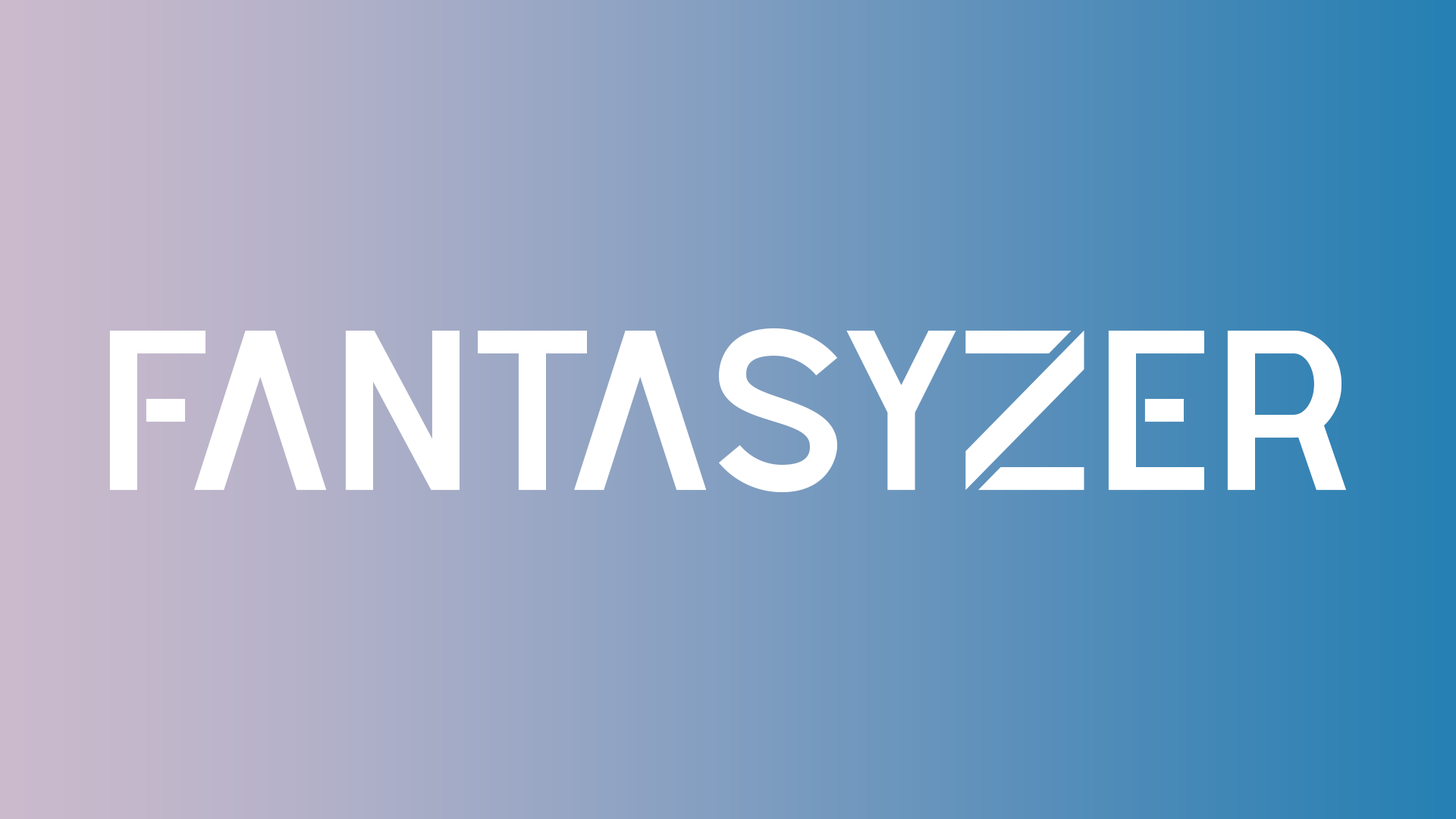
<style>
.page{position:relative;width:1456px;height:819px}
.page>*{position:absolute;margin:0}
.t1{font:227.5px "DesertaRegular";color:#ffffff}
</style>
<div class="page">
<p class="t1" style="left:109px;top:328px;width:1237px;height:164px">FANTASYZER</p>
</div>
